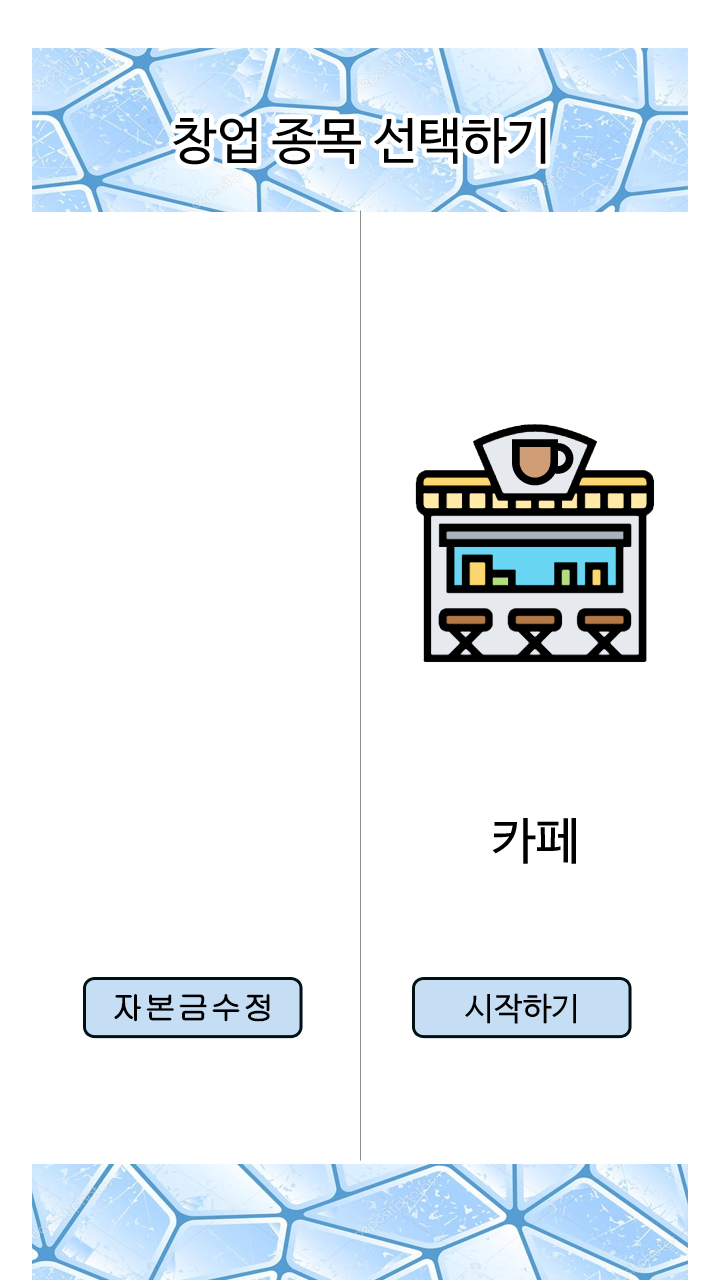
<style>
.page{position:relative;width:720px;height:1280px;background:#ffffff}
.page>*{position:absolute;margin:0}
.t1{font:50px "NanumBarunGothic";color:#000000}
.t2{font:32px "Gulim";color:#000000;font-weight:bold}
.t3{font:32px "NanumBarunGothic";color:#000000}
</style>
<div class="page">
<p class="t1" style="left:173px;top:117px;width:373px;height:48px">창업 종목 선택하기</p>
<p class="t1" style="left:492px;top:818px;width:84px;height:46px">카페</p>
<p class="t2" style="left:114px;top:994px;width:156px;height:28px">자본금수정</p>
<p class="t3" style="left:465px;top:993px;width:111px;height:31px">시작하기</p>
</div>
